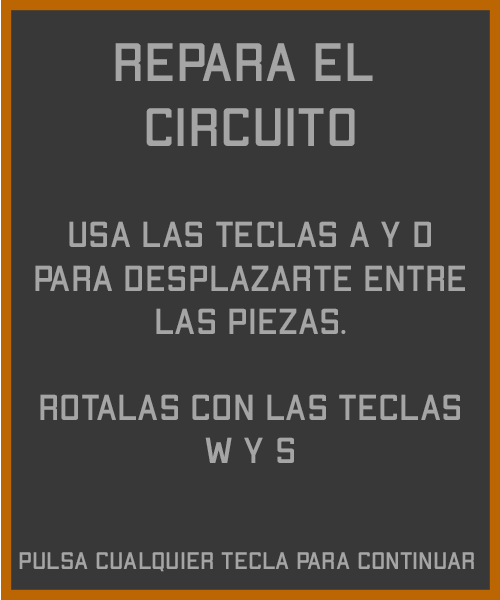
<style>
.page{position:relative;width:500px;height:600px;background:#383838}
.page>*{position:absolute;margin:0}
.t1{font:54px "ApexMk2-Regular";color:#a5a5a5}
.t2{font:36px "ApexMk2-Regular";color:#a5a5a5}
.t3{font:24px "ApexMk2-Regular";color:#a5a5a5}
</style>
<div class="page">
<p class="t1" style="left:115px;top:43px;width:258px;height:103px;text-align:center">repara el <br>circuito</p>
<p class="t2" style="left:35px;top:221px;width:430px;height:242px;text-align:center">usa las teclas a y d<br>para desplazarte entre<br>las piezas.<br><br>rotalas con las teclas<br>w y s</p>
<p class="t3" style="left:19px;top:552px;width:455px;height:20px">pulsa cualquier tecla para continuar</p>
</div>
